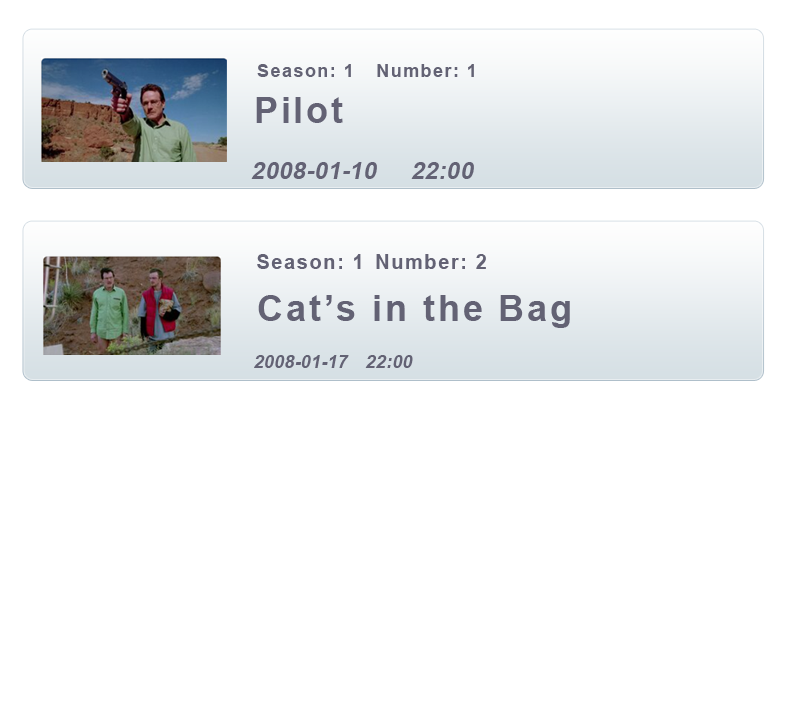
<style>
.page{position:relative;width:800px;height:725px;background:#ffffff}
.page>*{position:absolute;margin:0}
.t1{font:18px "Arial-BoldMT";letter-spacing:0.08em;color:#636274}
.t2{font:36px "Arial-BoldMT";letter-spacing:0.08em;color:#636274}
.t3{font:24px "Arial-BoldMT";letter-spacing:0.01em;color:#636274;font-style:italic}
.t4{font:20px "Arial-BoldMT";letter-spacing:0.08em;color:#636274}
.t5{font:18px "Arial-BoldMT";letter-spacing:0.01em;color:#636274;font-style:italic}
</style>
<div class="page">
<p class="t1" style="left:257px;top:64px;width:94px;height:13px">Season: 1</p>
<p class="t1" style="left:377px;top:64px;width:97px;height:13px">Number: 1</p>
<p class="t2" style="left:256px;top:97px;width:87px;height:26px">Pilot</p>
<p class="t3" style="left:251px;top:162px;width:126px;height:17px">2008-01-10</p>
<p class="t3" style="left:411px;top:162px;width:63px;height:17px">22:00</p>
<p class="t4" style="left:257px;top:254px;width:104px;height:15px">Season: 1</p>
<p class="t4" style="left:376px;top:254px;width:110px;height:15px">Number: 2</p>
<p class="t2" style="left:258px;top:295px;width:312px;height:33px">Cat’s in the Bag</p>
<p class="t5" style="left:254px;top:355px;width:95px;height:13px">2008-01-17</p>
<p class="t5" style="left:365px;top:355px;width:48px;height:13px">22:00</p>
</div>
